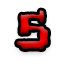
<style>
.page{position:relative;width:71px;height:71px;background:#ffffff}
.page>*{position:absolute;margin:0}
.t1{font:55px "Tipi-Organic"}
</style>
<div class="page">
<p class="t1" style="left:17px;top:10px;width:31px;height:39px">5</p>
</div>
